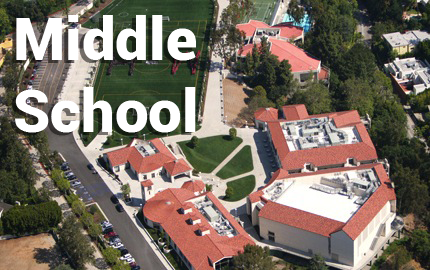
<style>
.page{position:relative;width:430px;height:270px}
.page>*{position:absolute;margin:0}
.t1{font:60px "Roboto-Black";color:#ffffff}
</style>
<div class="page">
<p class="t1" style="left:15px;top:15px;width:181px;height:118px">Middle<br>School</p>
</div>
